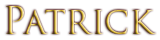
<style>
.page{position:relative;width:160px;height:40px;background:#ffffff}
.page>*{position:absolute;margin:0}
.t1{font:36px "TrajanPro-Regular"}
</style>
<div class="page">
<p class="t1" style="left:6px;top:6px;width:150px;height:28px">Patrick</p>
</div>
